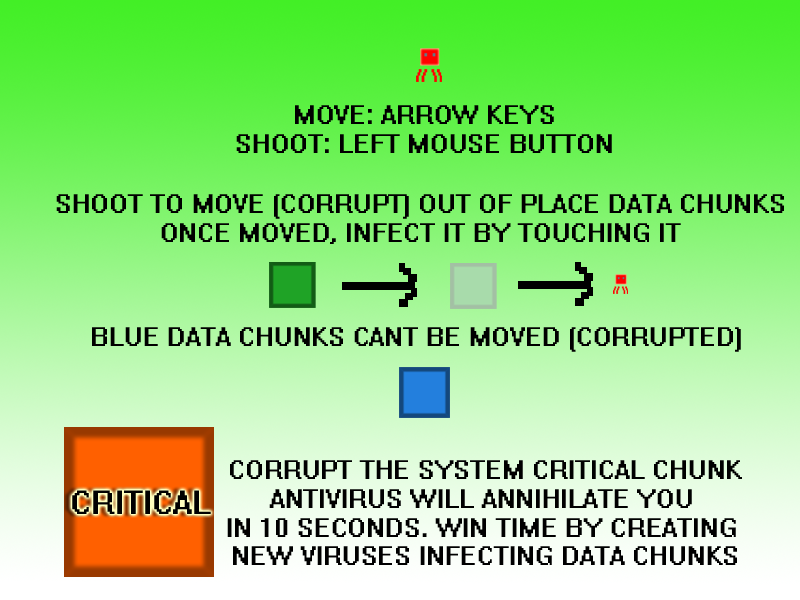
<style>
.page{position:relative;width:800px;height:600px}
.page>*{position:absolute;margin:0}
.t1{font:24px "System";color:#000000}
</style>
<div class="page">
<p class="t1" style="left:236px;top:105px;width:376px;height:48px;text-align:center">MOVE: ARROW KEYS<br>SHOOT: LEFT MOUSE BUTTON</p>
<p class="t1" style="left:56px;top:194px;width:728px;height:50px;text-align:center">SHOOT TO MOVE (CORRUPT) OUT OF PLACE DATA CHUNKS<br>ONCE MOVED, INFECT IT BY TOUCHING IT</p>
<p class="t1" style="left:92px;top:327px;width:649px;height:25px">BLUE DATA CHUNKS CANT BE MOVED (CORRUPTED)</p>
<p class="t1" style="left:227px;top:460px;width:515px;height:105px;text-align:center">CORRUPT THE SYSTEM CRITICAL CHUNK<br>ANTIVIRUS WILL ANNIHILATE YOU <br>IN 10 SECONDS. WIN TIME BY CREATING <br>NEW VIRUSES INFECTING DATA CHUNKS</p>
</div>
